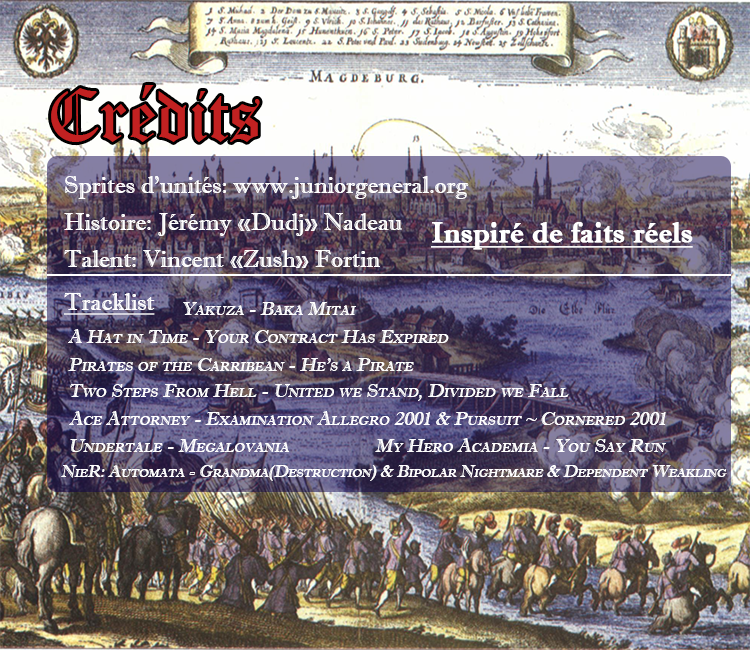
<style>
.page{position:relative;width:750px;height:650px}
.page>*{position:absolute;margin:0}
.t1{font:72px "OldEnglishTextMT";color:#c22121}
.t2{font:24px "ImprintMT-Shadow";color:#ffffff}
.t3{font:29.2px "ImprintMT-Shadow";color:#ffffff;font-weight:bold;text-decoration:underline}
.t4{font:24px "ImprintMT-Shadow";color:#ffffff;text-decoration:underline}
.t5{font:18.8px "ImprintMT-Shadow";color:#ffffff;font-variant:small-caps;font-style:italic}
.t6{font:16.7px "ImprintMT-Shadow";color:#ffffff;font-variant:small-caps;font-style:italic}
</style>
<div class="page">
<p class="t1" style="left:51px;top:85px;width:209px;height:57px">Crédits</p>
<p class="t2" style="left:65px;top:176px;width:404px;height:23px">Sprites d’unités: www.juniorgeneral.org</p>
<p class="t2" style="left:64px;top:213px;width:338px;height:23px">Histoire: Jérémy «Dudj» Nadeau</p>
<p class="t3" style="left:431px;top:222px;width:262px;height:28px">Inspiré de faits réels</p>
<p class="t2" style="left:64px;top:250px;width:316px;height:18px">Talent: Vincent «Zush» Fortin</p>
<p class="t4" style="left:64px;top:293px;width:91px;height:22px">Tracklist</p>
<p class="t5" style="left:183px;top:302px;width:173px;height:13px">Yakuza - Baka Mitai</p>
<p class="t5" style="left:68px;top:329px;width:381px;height:14px">A Hat in Time - Your Contract Has Expired</p>
<p class="t5" style="left:68px;top:358px;width:346px;height:13px">Pirates of the Carribean - He’s a Pirate</p>
<p class="t5" style="left:70px;top:384px;width:499px;height:17px">Two Steps From Hell - United we Stand, Divided we Fall</p>
<p class="t5" style="left:69px;top:411px;width:597px;height:14px">Ace Attorney - Examination Allegro 2001 &amp; Pursuit ~ Cornered 2001</p>
<p class="t5" style="left:375px;top:438px;width:291px;height:14px">My Hero Academia - You Say Run</p>
<p class="t5" style="left:70px;top:439px;width:220px;height:13px">Undertale - Megalovania</p>
<p class="t6" style="left:61px;top:465px;width:666px;height:16px">NieR: Automata - Grandma(Destruction) &amp; Bipolar Nightmare &amp; Dependent Weakling</p>
</div>
